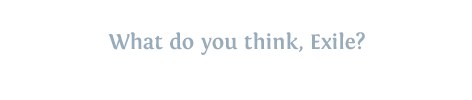
<style>
.page{position:relative;width:472px;height:100px;background:#ffffff}
.page>*{position:absolute;margin:0}
.t1{font:22px "Fontin-Bold";color:#98abba}
</style>
<div class="page">
<p class="t1" style="left:108px;top:32px;width:257px;height:23px">What do you think, Exile?</p>
</div>
